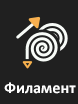
<style>
.page{position:relative;width:78px;height:104px;background:#202020}
.page>*{position:absolute;margin:0}
.t1{font:12px "Calibri-Bold";color:#ffffff}
</style>
<div class="page">
<p class="t1" style="left:4px;top:82px;width:72px;height:12px">Филамент</p>
</div>
